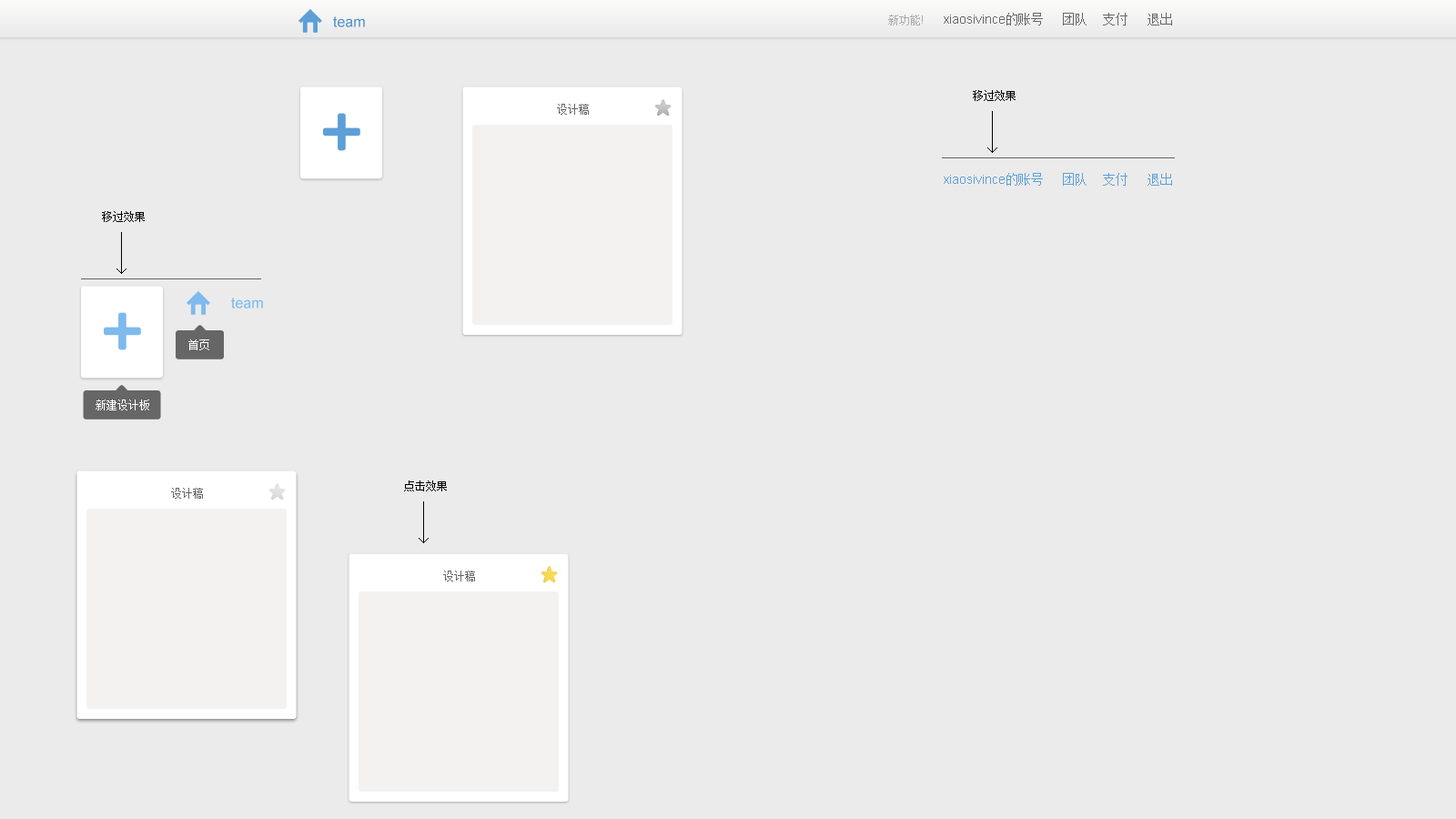
<style>
.page{position:relative;width:1456px;height:819px;background:#ebebeb}
.page>*{position:absolute;margin:0}
.t1{font:14.6px "ArialMT";color:#5495cc}
.t2{font:10.9px "SimSun";color:#aaaaaa}
.t3{font:10.9px "ArialMT";color:#aaaaaa}
.t4{font:12.7px "ArialMT";color:#666666}
.t5{font:12.7px "SimSun";color:#666666}
.t6{font:10.9px "SimSun";color:#000000}
.t7{font:10.9px "SimSun";color:#666666}
.t8{font:12.7px "ArialMT";color:#5d9fd7}
.t9{font:12.7px "SimSun";color:#5d9fd7}
.t10{font:14.6px "ArialMT";color:#7ebaed}
.t11{font:10.9px "SimSun";color:#ffffff}
</style>
<div class="page">
<p class="t1" style="left:333px;top:16px;width:32px;height:11px">team</p>
<p class="t2" style="left:888px;top:15px;width:35px;height:10px">新功能<span class="t3">!</span></p>
<p class="t4" style="left:944px;top:13px;width:99px;height:12px">xiaosivince<span class="t5">的账号</span></p>
<p class="t5" style="left:1063px;top:13px;width:24px;height:12px">团队</p>
<p class="t5" style="left:1103px;top:13px;width:24px;height:12px">支付</p>
<p class="t5" style="left:1147px;top:13px;width:25px;height:12px">退出</p>
<p class="t6" style="left:973px;top:90px;width:43px;height:11px">移过效果</p>
<p class="t7" style="left:557px;top:104px;width:32px;height:11px">设计稿</p>
<p class="t8" style="left:944px;top:173px;width:99px;height:13px">xiaosivince<span class="t9">的账号</span></p>
<p class="t9" style="left:1063px;top:173px;width:24px;height:13px">团队</p>
<p class="t9" style="left:1103px;top:173px;width:24px;height:13px">支付</p>
<p class="t9" style="left:1147px;top:173px;width:25px;height:13px">退出</p>
<p class="t6" style="left:102px;top:211px;width:43px;height:11px">移过效果</p>
<p class="t10" style="left:231px;top:298px;width:32px;height:10px">team</p>
<p class="t11" style="left:188px;top:339px;width:21px;height:11px">首页</p>
<p class="t11" style="left:96px;top:399px;width:53px;height:11px">新建设计板</p>
<p class="t6" style="left:404px;top:480px;width:43px;height:11px">点击效果</p>
<p class="t7" style="left:171px;top:488px;width:32px;height:11px">设计稿</p>
<p class="t7" style="left:443px;top:571px;width:32px;height:10px">设计稿</p>
</div>
